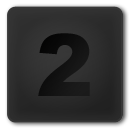
<style>
.page{position:relative;width:130px;height:130px}
.page>*{position:absolute;margin:0}
.t1{font:86.3px "Arial-Black";letter-spacing:0.11em;color:#000000}
</style>
<div class="page">
<p class="t1" style="left:38px;top:33px;width:52px;height:63px">2</p>
</div>
